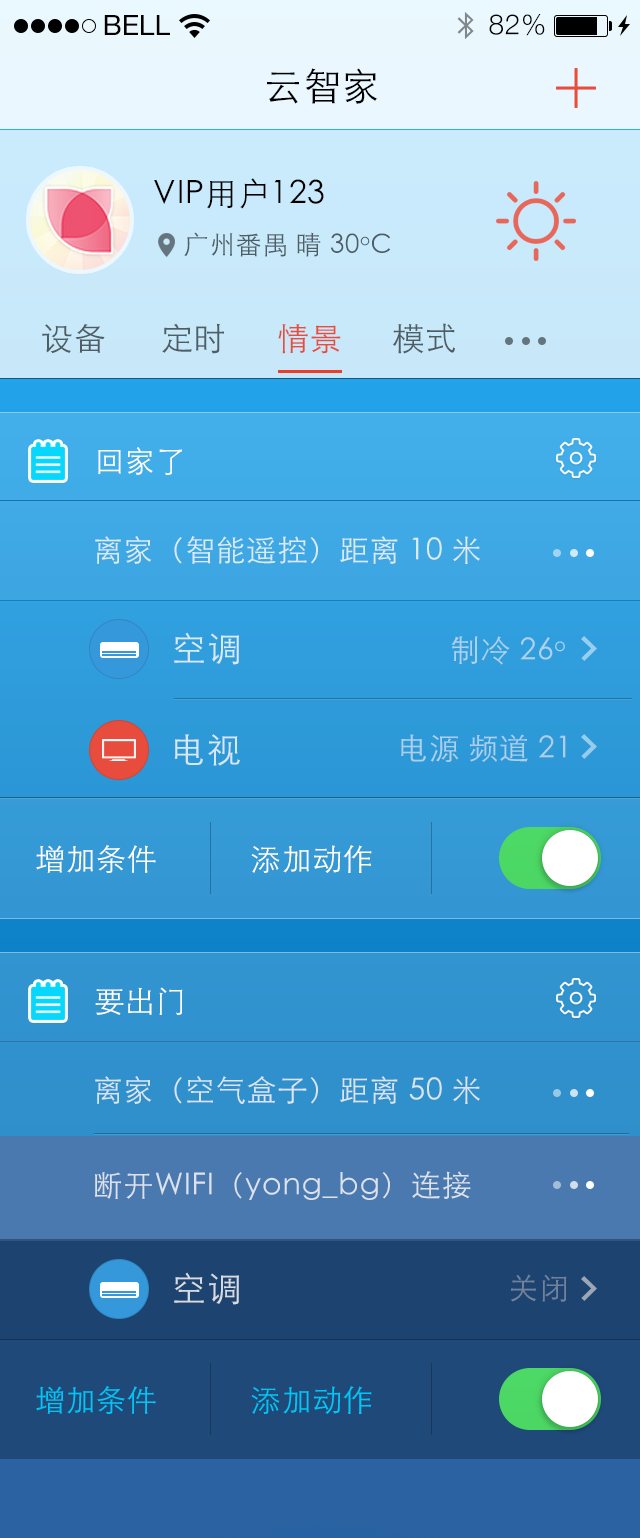
<style>
.page{position:relative;width:640px;height:1538px}
.page>*{position:absolute;margin:0}
.t1{font:28px "HelveticaNeue";color:#000000;text-transform:uppercase}
.t2{font:28px "HelveticaNeue-Light";letter-spacing:0.025em;color:#000000}
.t3{font:38px "STHeitiSC-Light";letter-spacing:0.025em;color:#000000}
.t4{font:32px "STHeitiSC-Light";letter-spacing:0.025em;color:#000000}
.t5{font:26px "STHeitiSC-Light";letter-spacing:0.025em;color:#4f5e65}
.t6{font:32px "STHeitiSC-Light";letter-spacing:0.025em;color:#4f5d65}
.t7{font:32px "STHeitiSC-Light";letter-spacing:0.025em;color:#e74c3c}
.t8{font:30px "STHeitiSC-Light";letter-spacing:0.025em;color:#ffffff}
.t9{font:30px "STHeitiSC-Light";letter-spacing:0.025em;color:#daebf8}
.t10{font:34px "STHeitiSC-Light";letter-spacing:0.025em;color:#d8e9f7}
.t11{font:30px "STHeitiSC-Light";letter-spacing:0.025em;color:#add2ee}
.t12{font:34px "STHeitiSC-Light";letter-spacing:0.025em;color:#d7e8f5}
.t13{font:30px "STHeitiSC-Light";letter-spacing:0.025em;color:#acd0ec}
.t14{font:30px "STHeitiSC-Light";letter-spacing:0.025em;color:#d8e6f3}
.t15{font:30px "STHeitiSC-Light";letter-spacing:0.025em;color:#dbe2ed}
.t16{font:34px "STHeitiSC-Light";letter-spacing:0.025em;color:#d6dae1}
.t17{font:30px "STHeitiSC-Light";letter-spacing:0.025em;color:#71829c}
.t18{font:30px "STHeitiSC-Light";letter-spacing:0.025em;color:#01c5f6}
</style>
<div class="page">
<p class="t1" style="left:104px;top:15px;width:66px;height:20px">Bell</p>
<p class="t2" style="left:489px;top:14px;width:56px;height:22px">82%</p>
<p class="t3" style="left:267px;top:68px;width:111px;height:36px">云智家</p>
<p class="t4" style="left:154px;top:178px;width:170px;height:31px">VIP用户123</p>
<p class="t5" style="left:184px;top:232px;width:207px;height:25px">广州番禺 晴 30oC</p>
<p class="t6" style="left:42px;top:323px;width:63px;height:31px">设备</p>
<p class="t6" style="left:162px;top:323px;width:62px;height:31px">定时</p>
<p class="t7" style="left:278px;top:324px;width:63px;height:30px">情景</p>
<p class="t6" style="left:392px;top:323px;width:63px;height:31px">模式</p>
<p class="t8" style="left:98px;top:447px;width:84px;height:28px">回家了</p>
<p class="t9" style="left:95px;top:536px;width:385px;height:28px">离家（智能遥控）距离 10 米</p>
<p class="t10" style="left:174px;top:632px;width:65px;height:33px">空调</p>
<p class="t11" style="left:451px;top:636px;width:114px;height:29px">制冷 26o</p>
<p class="t12" style="left:174px;top:734px;width:66px;height:32px">电视</p>
<p class="t13" style="left:401px;top:734px;width:165px;height:28px">电源 频道 21</p>
<p class="t8" style="left:36px;top:845px;width:120px;height:28px">增加条件</p>
<p class="t8" style="left:251px;top:845px;width:121px;height:28px">添加动作</p>
<p class="t8" style="left:95px;top:987px;width:88px;height:28px">要出门</p>
<p class="t14" style="left:95px;top:1076px;width:385px;height:28px">离家（空气盒子）距离 50 米</p>
<p class="t15" style="left:95px;top:1171px;width:376px;height:29px">断开WIFI（yong_bg）连接</p>
<p class="t16" style="left:174px;top:1272px;width:65px;height:33px">空调</p>
<p class="t17" style="left:510px;top:1274px;width:57px;height:28px">关闭</p>
<p class="t18" style="left:36px;top:1386px;width:120px;height:28px">增加条件</p>
<p class="t18" style="left:251px;top:1386px;width:121px;height:28px">添加动作</p>
</div>
